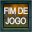
<style>
.page{position:relative;width:32px;height:32px}
.page>*{position:absolute;margin:0}
.t1{font:9px/10px "ArialMT";letter-spacing:-0.04em;color:#ebebe8;scale:0.85 1}
</style>
<div class="page">
<p class="t1" style="left:4px;top:7px;width:24px;height:18px;text-align:center">FIM DE<br>JOGO</p>
</div>
